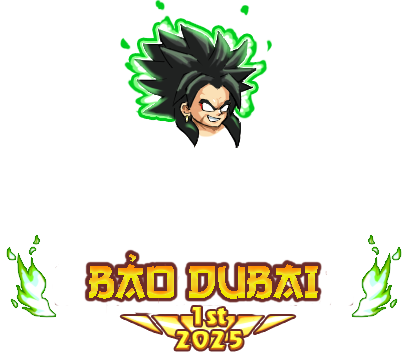
<style>
.page{position:relative;width:408px;height:352px;background:#ffffff}
.page>*{position:absolute;margin:0}
.t1{font:48px "SVN-GangofThree"}
</style>
<div class="page">
<p class="t1" style="left:89px;top:254px;width:229px;height:45px">BẢO DUBAI</p>
</div>
